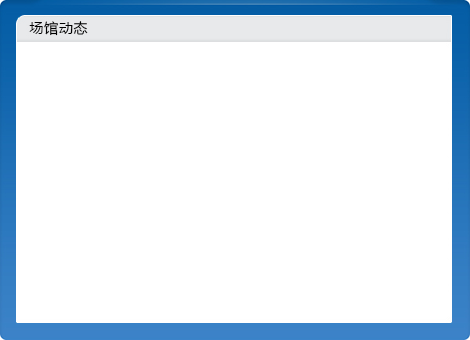
<style>
.page{position:relative;width:470px;height:340px;background:#ffffff}
.page>*{position:absolute;margin:0}
.t1{font:14px "MicrosoftYaHei";letter-spacing:0.05em;color:#000000}
</style>
<div class="page">
<p class="t1" style="left:29px;top:21px;width:59px;height:15px">场馆动态</p>
</div>
